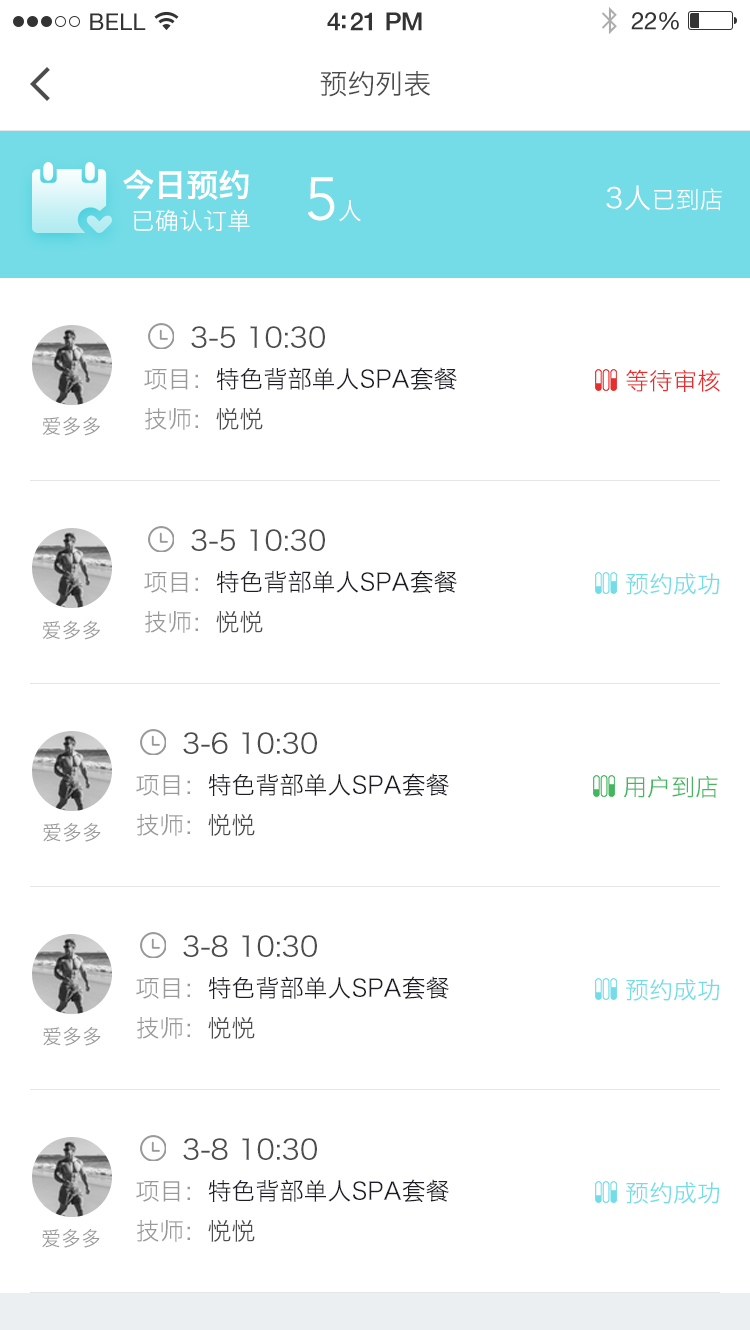
<style>
.page{position:relative;width:750px;height:1330px;background:#ffffff}
.page>*{position:absolute;margin:0}
.t1{font:28px "HiraginoSansGB-W3";color:#4c4c4c}
.t2{font:32px "HiraginoSansGB-W6";color:#ffffff}
.t3{font:60px "Avenir-Book";color:#ffffff}
.t4{font:24px "HiraginoSansGB-W3";color:#ffffff}
.t5{font:28px "HiraginoSansGB-W3";color:#ffffff}
.t6{font:24px/40px "HiraginoSansGB-W3";color:#1d1d26}
.t7{font:28px/40px "HiraginoSansGB-W3";color:#4c4c4c}
.t8{font:24px/40px "HiraginoSansGB-W3";color:#999999}
.t9{font:24px/40px "HiraginoSansGB-W3";color:#4c4c4c}
.t10{font:24px "HiraginoSansGB-W3";color:#e42f2f}
.t11{font:20px "HiraginoSansGB-W3";color:#999999}
.t12{font:24px "HiraginoSansGB-W3";color:#73dce6}
.t13{font:24px "HiraginoSansGB-W3";color:#44b65f}
</style>
<div class="page">
<p class="t1" style="left:320px;top:71px;width:111px;height:26px">预约列表</p>
<p class="t2" style="left:123px;top:169px;width:126px;height:31px">今日预约</p>
<p class="t3" style="left:307px;top:177px;width:54px;height:45px">5<span class="t4">人</span></p>
<p class="t4" style="left:606px;top:185px;width:117px;height:26px"><span class="t5">3人</span>已到店</p>
<p class="t4" style="left:133px;top:209px;width:117px;height:23px">已确认订单</p>
<p class="t6" style="left:144px;top:326px;width:313px;height:104px"><span class="t7">     3-5 10:30<br></span><span class="t8">项目：</span>特色背部单人SPA套餐<br><span class="t8">技师：</span><span class="t9">悦悦</span></p>
<p class="t10" style="left:626px;top:369px;width:94px;height:23px">等待审核</p>
<p class="t11" style="left:42px;top:416px;width:58px;height:20px">爱多多</p>
<p class="t6" style="left:144px;top:529px;width:313px;height:104px"><span class="t7">     3-5 10:30<br></span><span class="t8">项目：</span>特色背部单人SPA套餐<br><span class="t8">技师：</span><span class="t9">悦悦</span></p>
<p class="t12" style="left:626px;top:573px;width:93px;height:22px">预约成功</p>
<p class="t11" style="left:42px;top:620px;width:58px;height:20px">爱多多</p>
<p class="t6" style="left:136px;top:732px;width:313px;height:104px"><span class="t7">     3-6 10:30<br></span><span class="t8">项目：</span>特色背部单人SPA套餐<br><span class="t8">技师：</span><span class="t9">悦悦</span></p>
<p class="t13" style="left:623px;top:775px;width:95px;height:23px">用户到店</p>
<p class="t11" style="left:43px;top:823px;width:58px;height:19px">爱多多</p>
<p class="t6" style="left:136px;top:935px;width:313px;height:104px"><span class="t7">     3-8 10:30<br></span><span class="t8">项目：</span>特色背部单人SPA套餐<br><span class="t8">技师：</span><span class="t9">悦悦</span></p>
<p class="t12" style="left:626px;top:979px;width:93px;height:22px">预约成功</p>
<p class="t11" style="left:43px;top:1027px;width:58px;height:19px">爱多多</p>
<p class="t6" style="left:136px;top:1138px;width:313px;height:104px"><span class="t7">     3-8 10:30<br></span><span class="t8">项目：</span>特色背部单人SPA套餐<br><span class="t8">技师：</span><span class="t9">悦悦</span></p>
<p class="t12" style="left:626px;top:1182px;width:93px;height:22px">预约成功</p>
<p class="t11" style="left:42px;top:1229px;width:58px;height:19px">爱多多</p>
</div>
